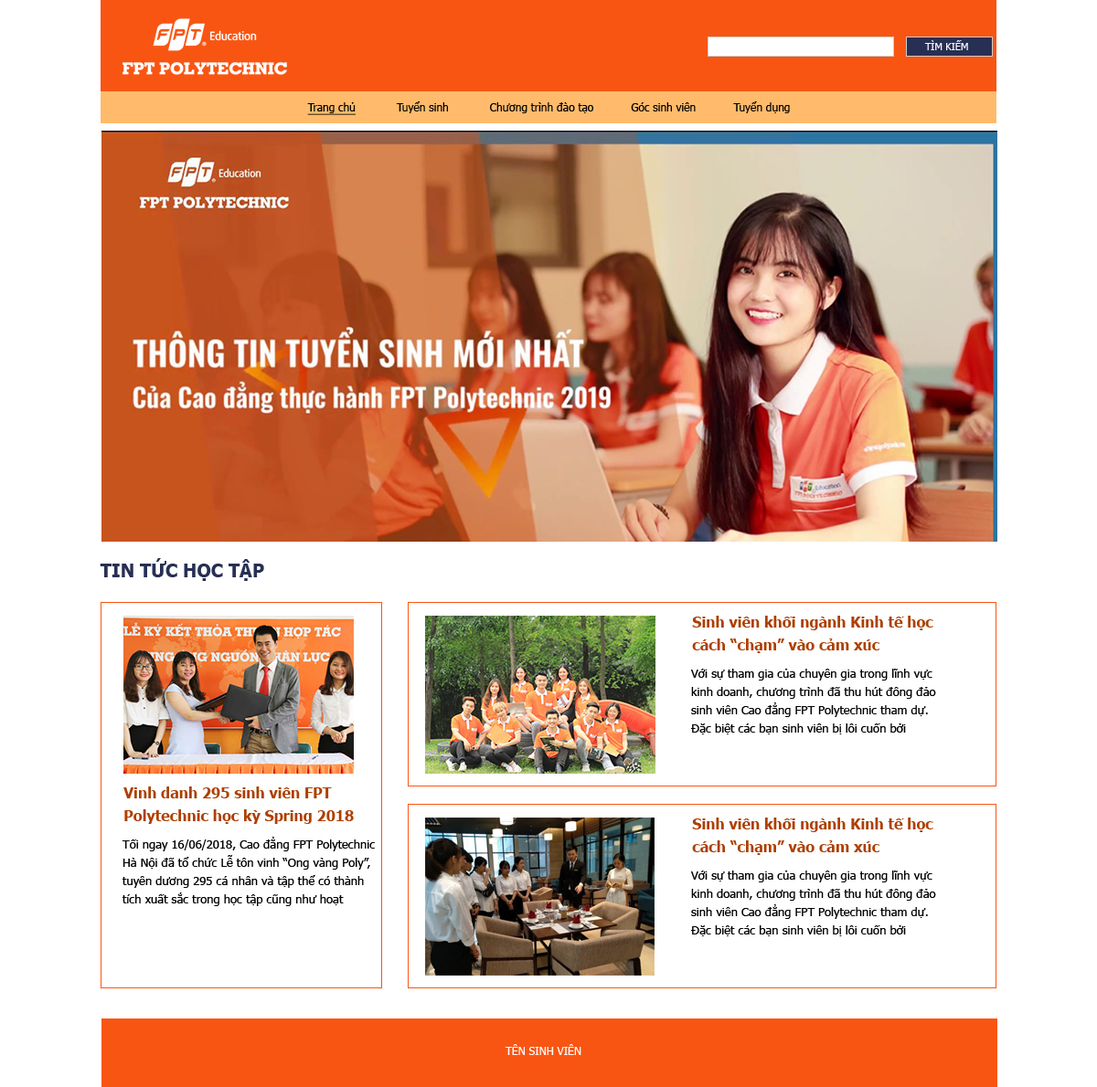
<style>
.page{position:relative;width:1097px;height:1087px;background:#ffffff}
.page>*{position:absolute;margin:0}
.t1{font:10.1px "Tahoma";color:#fefbfb}
.t2{font:11px "Tahoma";color:#000000}
.t3{font:11px "Tahoma";color:#000000;text-decoration:underline}
.t4{font:18.3px "Tahoma-Bold";color:#272f54}
.t5{font:14.6px/22.8px "Tahoma-Bold";color:#ad3f00}
.t6{font:11.9px/18.3px "Tahoma";color:#000000}
.t7{font:11px "Tahoma";color:#ffffff}
</style>
<div class="page">
<p class="t1" style="left:924px;top:40px;width:44px;height:10px">TÌM KIẾM</p>
<p class="t2" style="left:307px;top:101px;width:483px;height:14px"><span class="t3">Trang chủ</span>            Tuyển sinh            Chương trình đào tạo           Góc sinh viên           Tuyển dụng</p>
<p class="t4" style="left:100px;top:558px;width:164px;height:23px">TIN TỨC HỌC TẬP</p>
<p class="t5" style="left:692px;top:616px;width:241px;height:37px">Sinh viên khối ngành Kinh tế học <br>cách “chạm” vào cảm xúc</p>
<p class="t6" style="left:690px;top:669px;width:246px;height:66px">Với sự tham gia của chuyên gia trong lĩnh vực <br>kinh doanh, chương trình đã thu hút đông đảo <br>sinh viên Cao đẳng FPT Polytechnic tham dự. <br>Đặc biệt các bạn sinh viên bị lôi cuốn bởi</p>
<p class="t5" style="left:123px;top:787px;width:231px;height:37px">Vinh danh 295 sinh viên FPT <br>Polytechnic học kỳ Spring 2018</p>
<p class="t5" style="left:692px;top:818px;width:241px;height:37px">Sinh viên khối ngành Kinh tế học <br>cách “chạm” vào cảm xúc</p>
<p class="t6" style="left:122px;top:837px;width:254px;height:69px">Tối ngày 16/06/2018, Cao đẳng FPT Polytechnic<br>Hà Nội đã tổ chức Lễ tôn vinh “Ong vàng Poly”, <br>tuyên dương 295 cá nhân và tập thể có thành <br>tích xuất sắc trong học tập cũng như hoạt</p>
<p class="t6" style="left:690px;top:871px;width:246px;height:66px">Với sự tham gia của chuyên gia trong lĩnh vực <br>kinh doanh, chương trình đã thu hút đông đảo <br>sinh viên Cao đẳng FPT Polytechnic tham dự. <br>Đặc biệt các bạn sinh viên bị lôi cuốn bởi</p>
<p class="t7" style="left:504px;top:1044px;width:77px;height:11px">TÊN SINH VIÊN</p>
</div>
